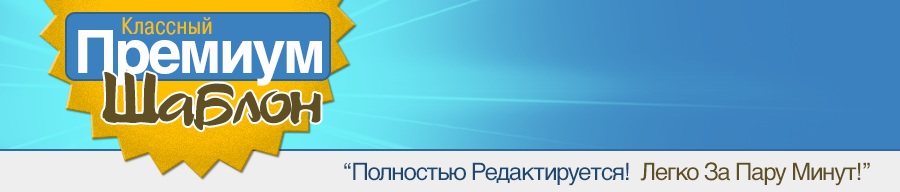
<style>
.page{position:relative;width:900px;height:192px}
.page>*{position:absolute;margin:0}
.t1{font:24px "PragmaticaCondBook";color:#febf02}
.t2{font:60px "HelveticaCyr-Bold";letter-spacing:-0.05em;color:#fdfdfd}
.t3{font:72px "Stylo-Bold";letter-spacing:-0.05em;color:#604f23}
.t4{font:24px "HelveticaCyr-Upright";letter-spacing:-0.05em;color:#1d4970}
.t5{font:24px "HelveticaCyr-Upright";letter-spacing:-0.05em;color:#604f23}
</style>
<div class="page">
<p class="t1" style="left:122px;top:17px;width:90px;height:18px">Классный</p>
<p class="t2" style="left:78px;top:30px;width:244px;height:56px">Премиум</p>
<p class="t3" style="left:102px;top:72px;width:219px;height:59px">Шаблон</p>
<p class="t4" style="left:344px;top:162px;width:526px;height:24px">“Полностью Редактируется!  <span class="t5">Легко За Пару Минут!”</span></p>
</div>
